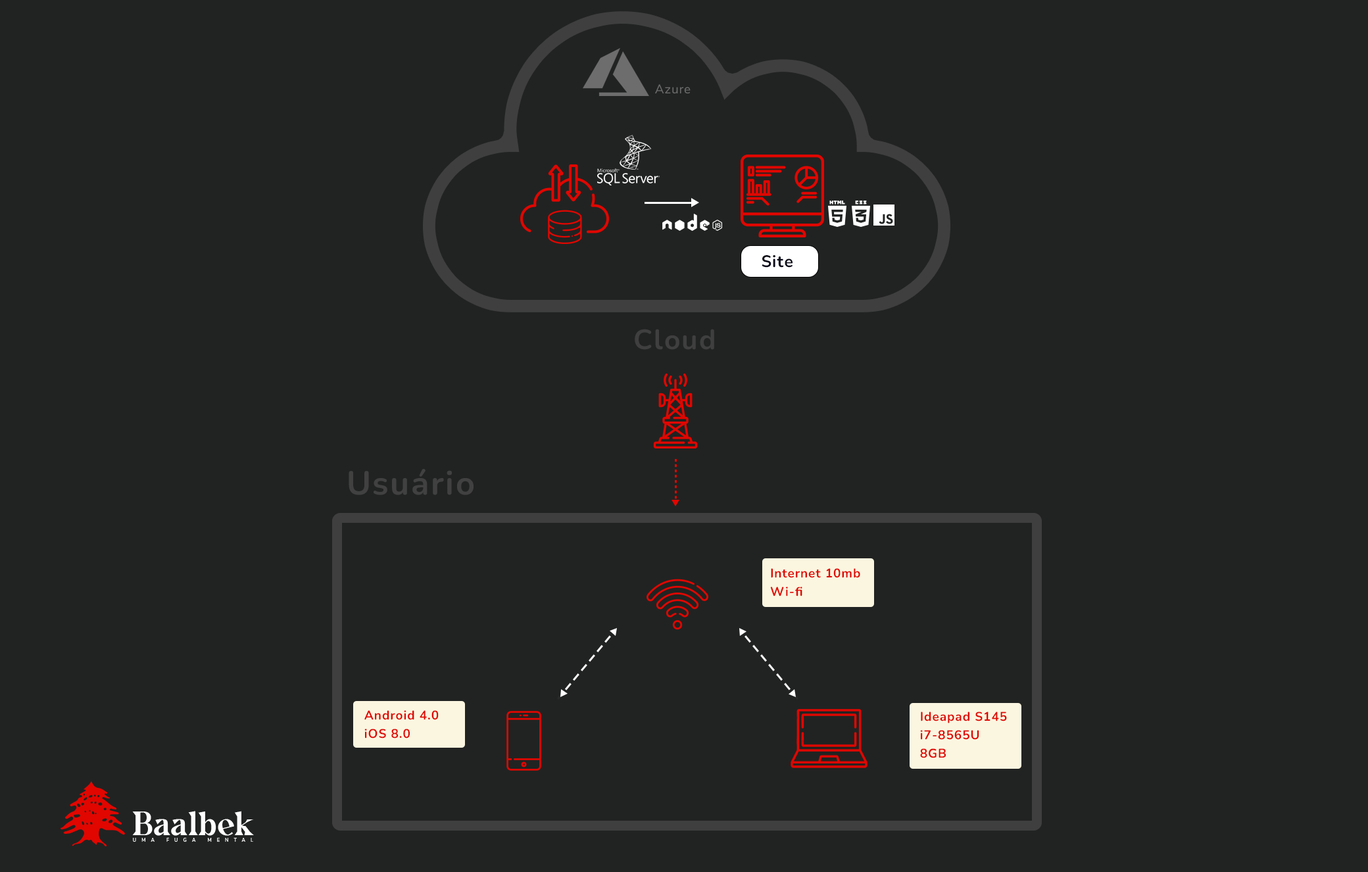
<style>
.page{position:relative;width:1368px;height:872px;background:#212322}
.page>*{position:absolute;margin:0}
.t1{font:12.5px "NunitoSans-Regular";letter-spacing:0.05em;color:#6d6d6d}
.t2{font:16.4px "Nunito-Bold";letter-spacing:0.05em;color:#0b0a18}
.t3{font:27.9px "Nunito-Bold";letter-spacing:0.05em;color:#3f3f3f}
.t4{font:33.1px "Nunito-Bold";letter-spacing:0.05em;color:#414141}
.t5{font:12.5px/18.4px "Nunito-Bold";letter-spacing:0.05em;color:#e10600}
</style>
<div class="page">
<p class="t1" style="left:655px;top:84px;width:35px;height:10px">Azure</p>
<p class="t2" style="left:761px;top:255px;width:31px;height:13px">Site</p>
<p class="t3" style="left:635px;top:329px;width:79px;height:21px">Cloud</p>
<p class="t4" style="left:348px;top:469px;width:125px;height:26px">Usuário</p>
<p class="t5" style="left:770px;top:568px;width:90px;height:28px">Internet 10mb<br>Wi-fi</p>
<p class="t5" style="left:364px;top:710px;width:75px;height:28px">Android 4.0<br>iOS 8.0</p>
<p class="t5" style="left:920px;top:711px;width:87px;height:47px">Ideapad S145<br>i7-8565U<br>8GB</p>
</div>
